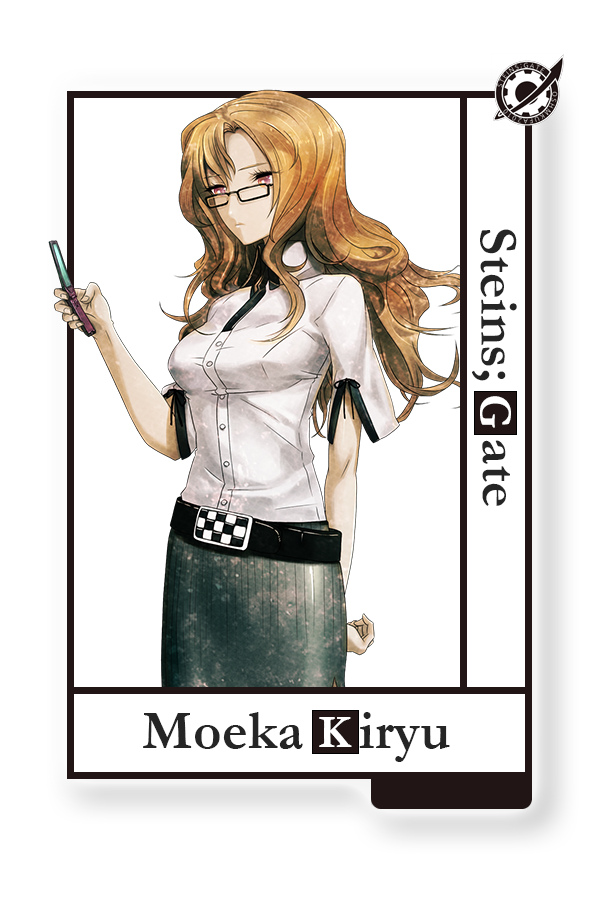
<style>
.page{position:relative;width:600px;height:900px;background:#ffffff}
.page>*{position:absolute;margin:0}
.t1{font:55.4px "Garamond-Bold";color:#252525}
.t2{font:47px "Garamond-Bold";color:#ffffff}
</style>
<div class="page">
<p class="t1" style="left:472px;top:229px;width:45px;height:277px;rotate:89deg">Steins;    ate</p>
<p class="t2" style="left:480px;top:396px;width:31px;height:32px;rotate:90deg">G</p>
<p class="t1" style="left:143px;top:712px;width:307px;height:50px">Moeka    iryu</p>
<p class="t2" style="left:319px;top:717px;width:33px;height:30px">K</p>
</div>
